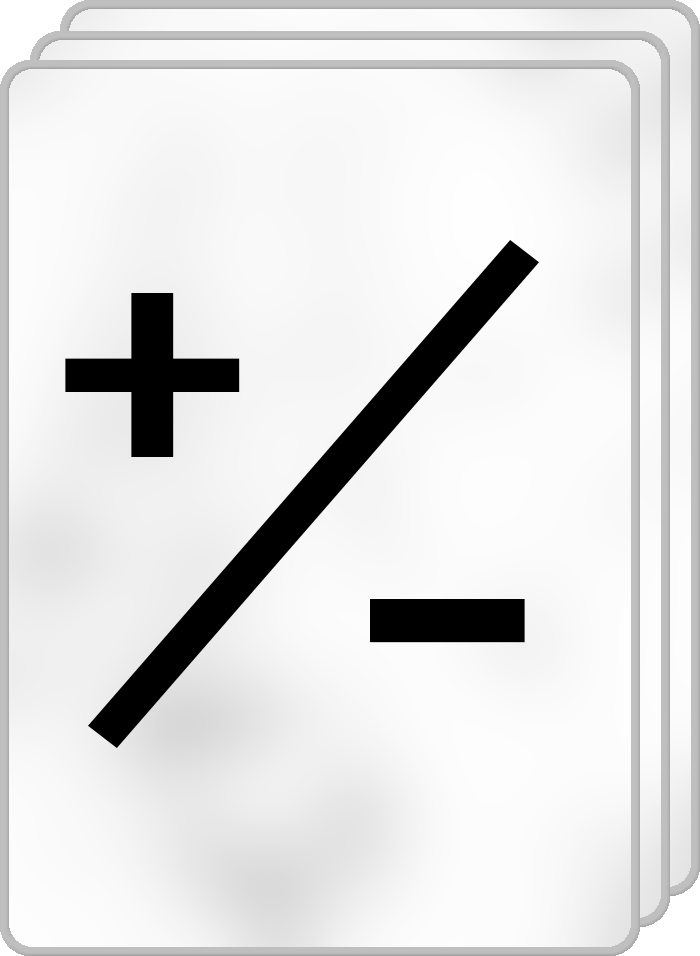
<style>
.page{position:relative;width:700px;height:956px}
.page>*{position:absolute;margin:0}
.t1{font:382.1px "Cadman-Bold";letter-spacing:0.003em;color:#000000;scale:1.11 1}
.t2{font:347.2px "Cadman-Bold";letter-spacing:0.003em;color:#000000;scale:1.46 1}
</style>
<div class="page">
<p class="t1" style="left:65px;top:293px;width:175px;height:164px">+</p>
<p class="t2" style="left:370px;top:599px;width:155px;height:44px">-</p>
</div>
